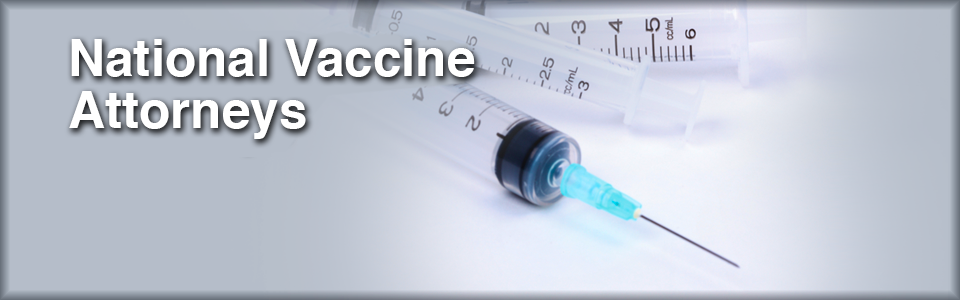
<style>
.page{position:relative;width:960px;height:300px}
.page>*{position:absolute;margin:0}
.t1{font:51px/52.6px "Helvetica-Bold";color:#ffffff}
</style>
<div class="page">
<p class="t1" style="left:69px;top:39px;width:406px;height:100px">National Vaccine<br>Attorneys</p>
</div>
